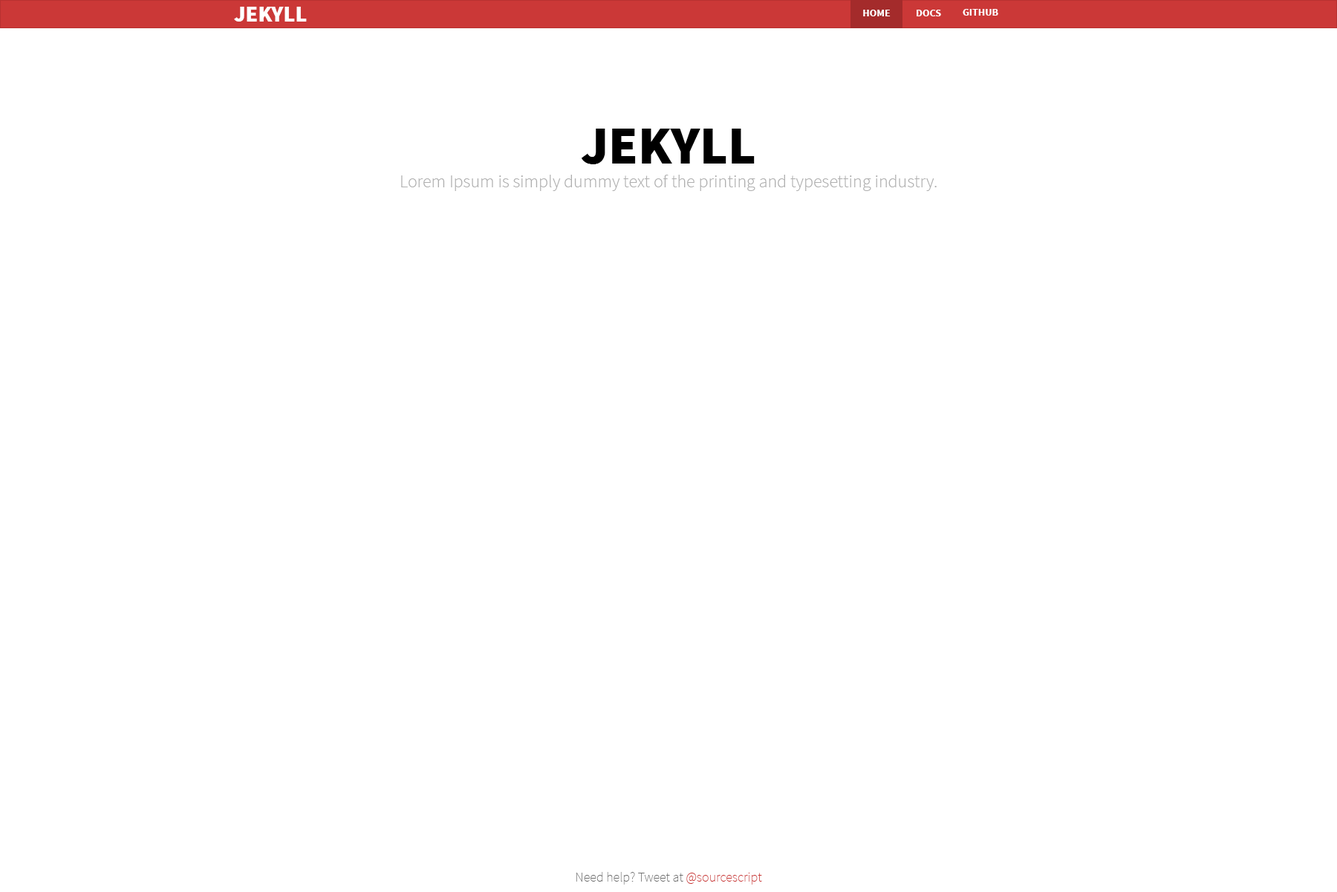
<style>
.page{position:relative;width:1337px;height:892px;background:#ffffff}
.page>*{position:absolute;margin:0}
.t1{font:22.3px "SourceSansPro-Black";color:#ffffff}
.t2{font:10.4px "SourceSansPro-Bold";color:#ffffff}
.t3{font:53.5px "SourceSansPro-Black";color:#000000}
.t4{font:17.8px "SourceSansPro-Light";color:#b0b0b0}
.t5{font:13.4px "SourceSansPro-ExtraLight";color:#707070}
.t6{font:13.4px "SourceSansPro-ExtraLight";color:#cb3837}
</style>
<div class="page">
<p class="t1" style="left:234px;top:7px;width:73px;height:15px">JEKYLL</p>
<p class="t2" style="left:863px;top:10px;width:28px;height:6px">HOME</p>
<p class="t2" style="left:917px;top:10px;width:24px;height:6px">DOCS</p>
<p class="t2" style="left:963px;top:9px;width:36px;height:7px">GITHUB</p>
<p class="t3" style="left:581px;top:129px;width:174px;height:35px">JEKYLL</p>
<p class="t4" style="left:401px;top:175px;width:536px;height:16px">Lorem Ipsum is simply dummy text of the printing and typesetting industry.</p>
<p class="t5" style="left:576px;top:872px;width:186px;height:12px">Need help? Tweet at <span class="t6">@sourcescript</span></p>
</div>
